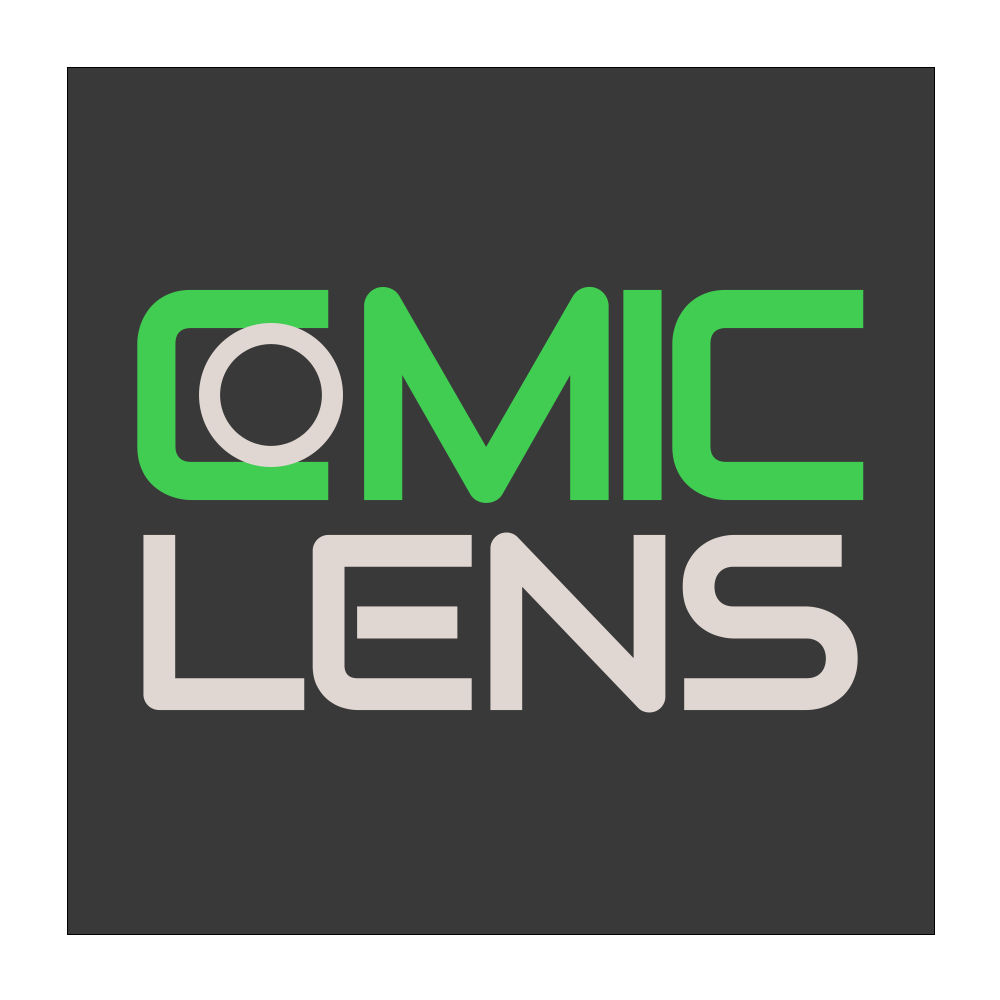
<style>
.page{position:relative;width:1000px;height:1000px;background:#393939}
.page>*{position:absolute;margin:0}
.t1{font:300px "Audiowide-Regular";letter-spacing:-0.1em;color:#41cd52}
.t2{font:300px "Audiowide-Regular";color:#41cd52}
.t3{font:250px "Audiowide-Regular";letter-spacing:-0.05em;color:#e0d7d2}
</style>
<div class="page">
<p class="t1" style="left:137px;top:286px;width:727px;height:217px"><span class="t2">C</span>MIC</p>
<p class="t3" style="left:143px;top:532px;width:715px;height:181px">LENS</p>
</div>
